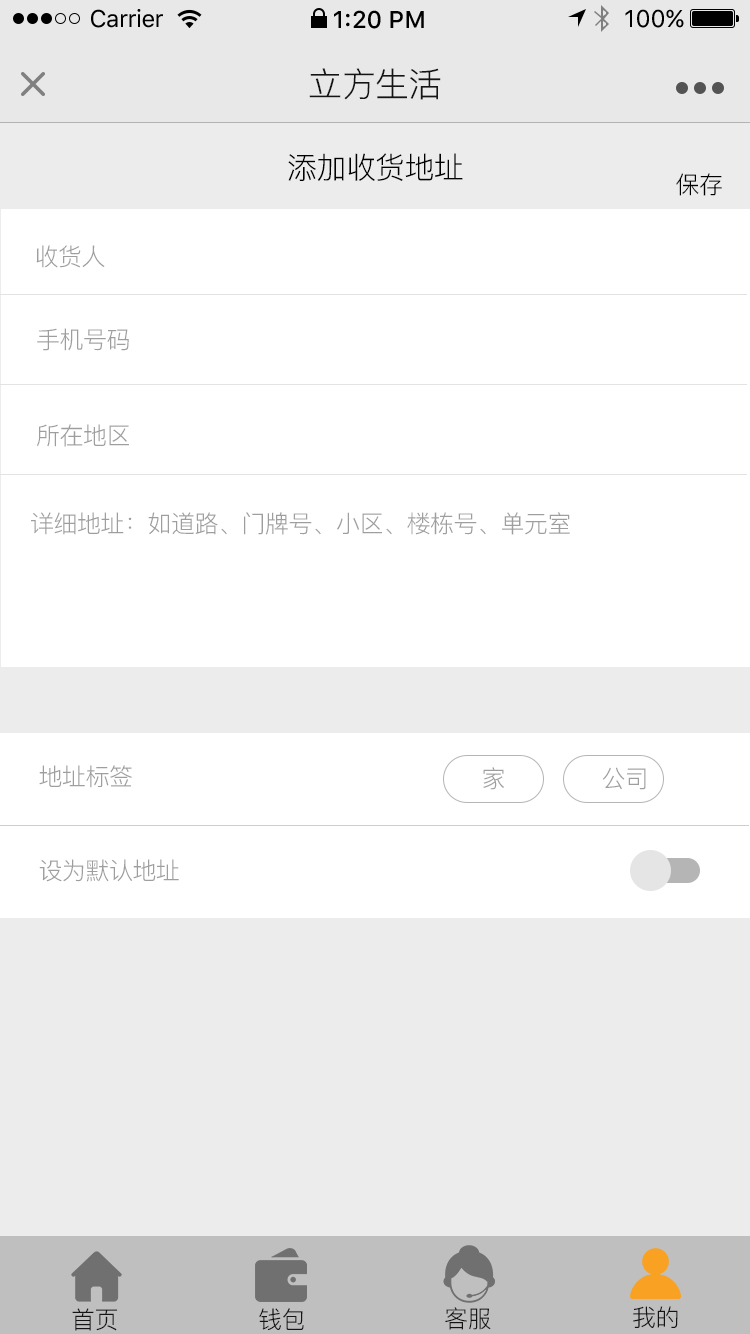
<style>
.page{position:relative;width:750px;height:1334px;background:#ffffff}
.page>*{position:absolute;margin:0}
.t1{font:24px "SFUIText-Regular";letter-spacing:-0.025em;color:#000000}
.t2{font:24px "SFUIText-Medium";color:#000000}
.t3{font:24px "SFUIText-Regular";color:#000000}
.t4{font:34px "PingFang-SC-Regular";letter-spacing:-0.02em;color:#141414}
.t5{font:30px "PingFang-SC-Regular";letter-spacing:-0.02em;color:#000000}
.t6{font:24px "PingFang-SC-Regular";letter-spacing:-0.02em;color:#000000}
.t7{font:24px "PingFang-SC-Regular";letter-spacing:-0.02em;color:#9f9e9e}
.t8{font:24px "PingFang-SC-Regular";letter-spacing:-0.02em;color:#141414}
</style>
<div class="page">
<p class="t1" style="left:91px;top:9px;width:72px;height:19px">Carrier</p>
<p class="t2" style="left:334px;top:10px;width:90px;height:19px">1:20 PM</p>
<p class="t3" style="left:625px;top:9px;width:59px;height:19px">100%</p>
<p class="t4" style="left:309px;top:68px;width:132px;height:32px">立方生活</p>
<p class="t5" style="left:288px;top:153px;width:175px;height:28px">添加收货地址</p>
<p class="t6" style="left:676px;top:173px;width:46px;height:23px">保存</p>
<p class="t7" style="left:36px;top:245px;width:69px;height:23px">收货人</p>
<p class="t7" style="left:37px;top:328px;width:92px;height:23px">手机号码</p>
<p class="t7" style="left:37px;top:424px;width:92px;height:23px">所在地区</p>
<p class="t7" style="left:31px;top:512px;width:539px;height:23px">详细地址：如道路、门牌号、小区、楼栋号、单元室</p>
<p class="t7" style="left:39px;top:765px;width:93px;height:23px">地址标签</p>
<p class="t7" style="left:483px;top:767px;width:21px;height:23px">家</p>
<p class="t7" style="left:602px;top:767px;width:44px;height:23px">公司</p>
<p class="t7" style="left:39px;top:859px;width:140px;height:23px">设为默认地址</p>
<p class="t8" style="left:72px;top:1308px;width:45px;height:23px">首页</p>
<p class="t8" style="left:259px;top:1308px;width:45px;height:23px">钱包</p>
<p class="t8" style="left:445px;top:1307px;width:46px;height:23px">客服</p>
<p class="t8" style="left:633px;top:1306px;width:45px;height:22px">我的</p>
</div>
